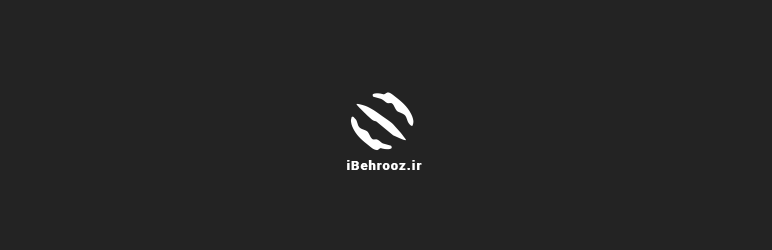
<style>
.page{position:relative;width:772px;height:250px;background:#232323}
.page>*{position:absolute;margin:0}
.t1{font:12.5px "Vazir-Black";letter-spacing:0.1em;color:#ffffff}
</style>
<div class="page">
<p class="t1" style="left:347px;top:160px;width:75px;height:10px">iBehrooz.ir</p>
</div>
